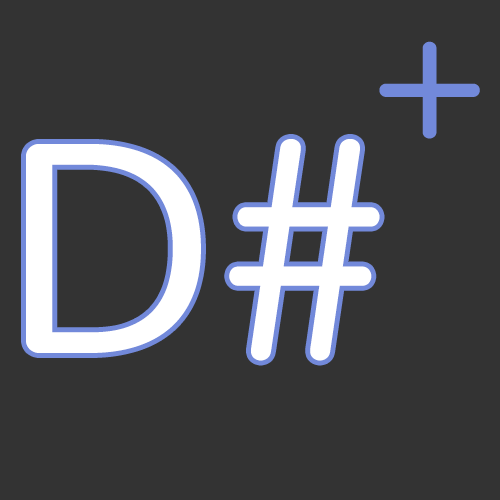
<style>
.page{position:relative;width:500px;height:500px;background:#333333}
.page>*{position:absolute;margin:0}
.t1{font:200px "Nunito-Light";color:#7289da}
.t2{font:300px "Nunito-Light";color:#ffffff}
</style>
<div class="page">
<p class="t1" style="left:379px;top:41px;width:101px;height:98px">+</p>
<p class="t2" style="left:26px;top:139px;width:354px;height:222px">D#</p>
</div>
